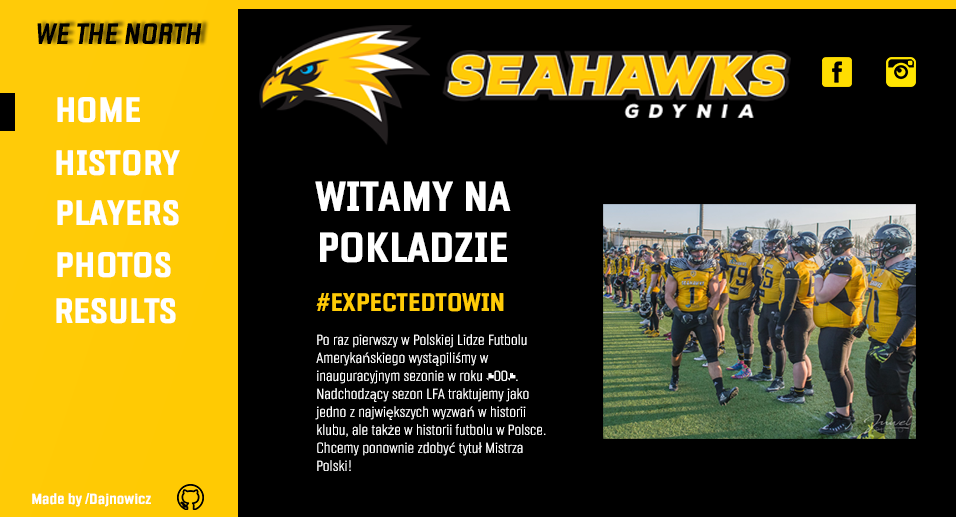
<style>
.page{position:relative;width:956px;height:517px;background:#000000}
.page>*{position:absolute;margin:0}
.t1{font:30px "Fragua-BoldItalic";color:#000000}
.t2{font:36px "Fragua-Bold";color:#ffffff}
.t3{font:43px "Fragua-Bold";color:#ffffff}
.t4{font:26px "Fragua-Bold";color:#ffcb07}
.t5{font:15px "Fragua-Light";color:#ffffff}
.t6{font:15px "MyriadPro-Regular";color:#ffffff}
.t7{font:15px "Fragua-Bold";color:#ffffff}
</style>
<div class="page">
<p class="t1" style="left:37px;top:23px;width:165px;height:21px">WE THE NORTH</p>
<p class="t2" style="left:57px;top:97px;width:83px;height:26px">HOME</p>
<p class="t2" style="left:56px;top:150px;width:124px;height:26px">HISTORY</p>
<p class="t3" style="left:315px;top:181px;width:196px;height:82px;text-align:center">WITAMY NA POKLADZIE</p>
<p class="t2" style="left:57px;top:200px;width:122px;height:26px">PLAYERS</p>
<p class="t2" style="left:57px;top:252px;width:114px;height:26px">PHOTOS</p>
<p class="t4" style="left:316px;top:293px;width:188px;height:19px">#EXPECTEDTOWIN</p>
<p class="t2" style="left:56px;top:298px;width:120px;height:26px">RESULTS</p>
<p class="t5" style="left:315px;top:334px;width:231px;height:137px">Po raz pierwszy w Polskiej Lidze Futbolu Ameryka<span class="t6">ń</span>skiego wyst<span class="t6">ą</span>pili<span class="t6">ś</span>my w inauguracyjnym sezonie w roku 2006. Nadchodz<span class="t6">ą</span>cy sezon LFA traktujemy jako jedno z najwi<span class="t6">ę</span>kszych wyzwa<span class="t6">ń</span> w historii klubu, ale tak<span class="t6">ż</span>e w historii futbolu w Polsce. Chcemy ponownie zdoby<span class="t6">ć</span> tytu<span class="t6">ł</span> Mistrza Polski!</p>
<p class="t7" style="left:32px;top:493px;width:119px;height:14px">Made by /Dajnowicz</p>
</div>
